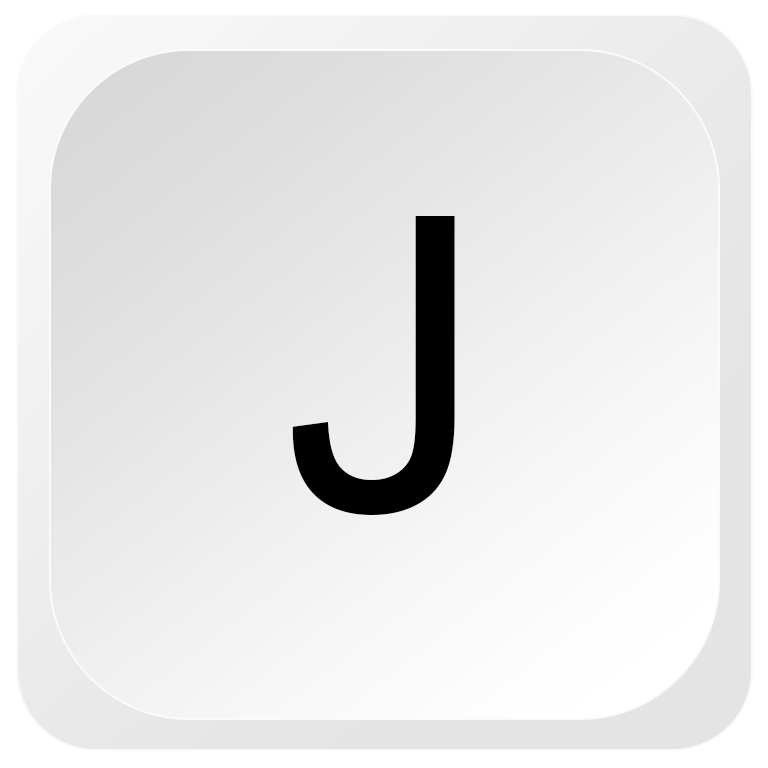
<style>
.page{position:relative;width:768px;height:768px}
.page>*{position:absolute;margin:0}
.t1{font:411px "ArialMT";color:#000000}
</style>
<div class="page">
<p class="t1" style="left:292px;top:216px;width:163px;height:299px">J</p>
</div>
